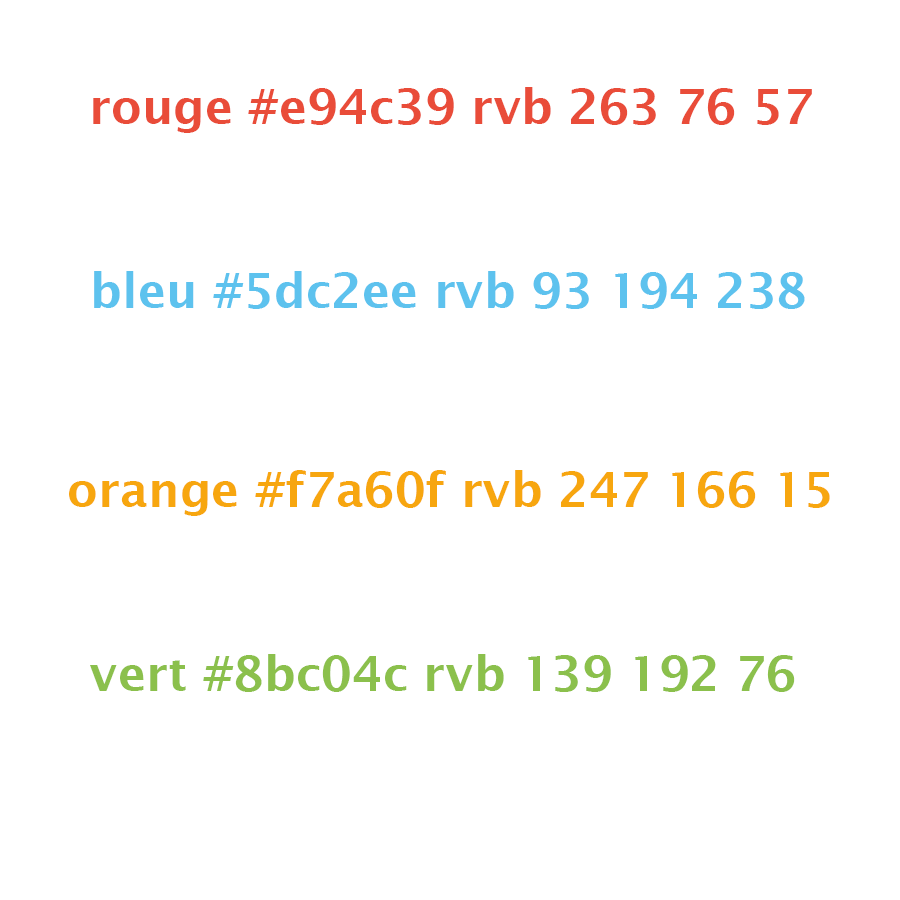
<style>
.page{position:relative;width:900px;height:900px;background:#ffffff}
.page>*{position:absolute;margin:0}
.t1{font:48px "LucidaSans-Demi";color:#e94c39}
.t2{font:48px "LucidaSans-Demi";color:#5dc2ee}
.t3{font:48px "LucidaSans-Demi";color:#f7a60f}
.t4{font:48px "LucidaSans-Demi";color:#8bc04c}
</style>
<div class="page">
<p class="t1" style="left:93px;top:87px;width:719px;height:46px">rouge #e94c39 rvb 263 76 57</p>
<p class="t2" style="left:94px;top:271px;width:711px;height:38px">bleu #5dc2ee rvb 93 194 238</p>
<p class="t3" style="left:69px;top:470px;width:761px;height:46px">orange #f7a60f rvb 247 166 15</p>
<p class="t4" style="left:90px;top:654px;width:705px;height:38px">vert #8bc04c rvb 139 192 76</p>
</div>
